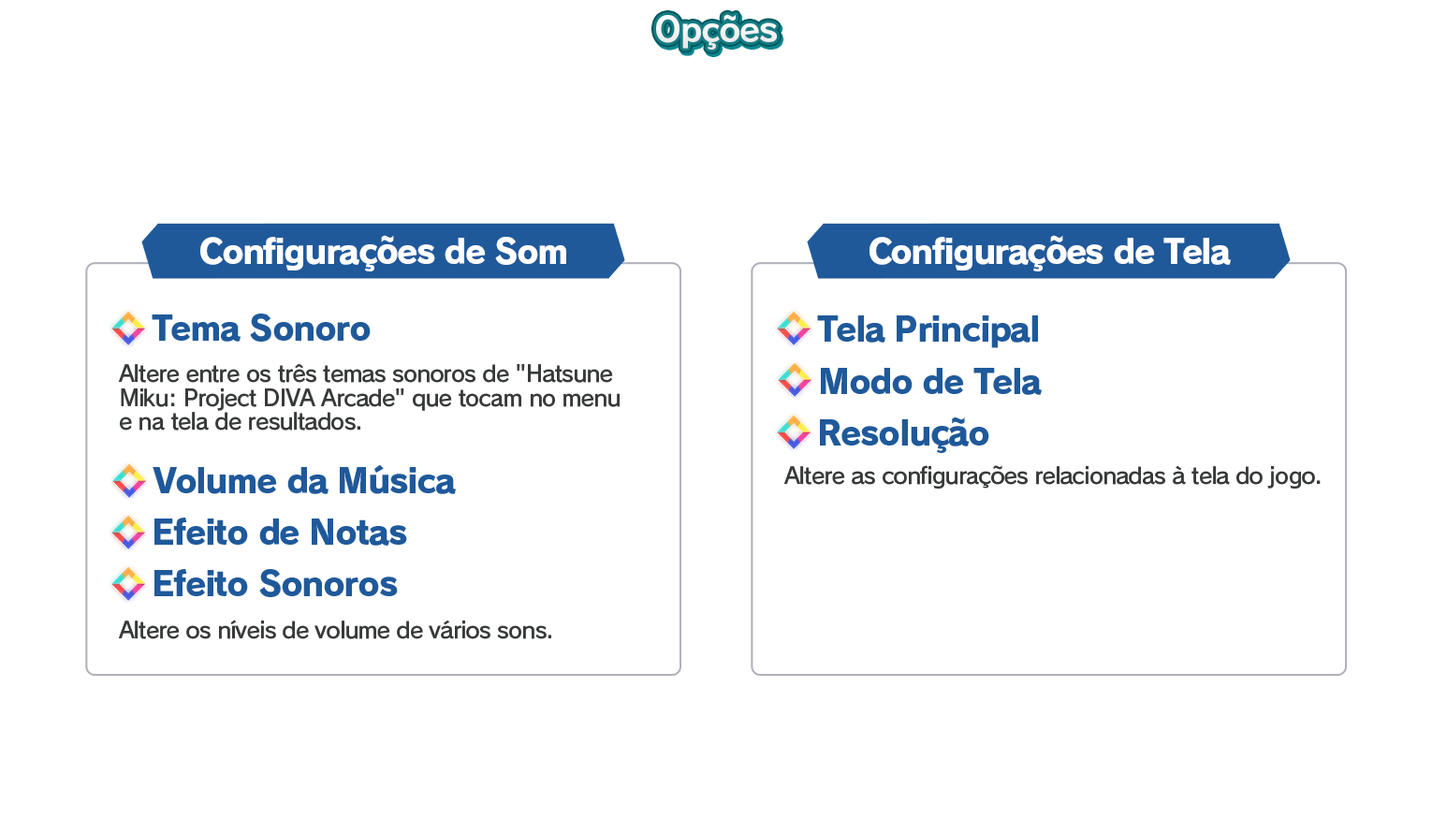
<style>
.page{position:relative;width:1432px;height:833px;background:#ffffff}
.page>*{position:absolute;margin:0}
.t1{font:33.7px "RodinPro-B";letter-spacing:-0.039em;color:#f2f3f3}
.t2{font:33.7px "RodinPro-EB";letter-spacing:-0.048em;color:#ffffff}
.t3{font:33.7px "RodinPro-EB";letter-spacing:-0.04em;color:#1f599a}
.t4{font:22.5px/23.7px "RodinPro-DB";letter-spacing:-0.04em;color:#383a3a}
.t5{font:22.5px "RodinPro-DB";letter-spacing:-0.04em;color:#383a3a}
</style>
<div class="page">
<p class="t1" style="left:656px;top:14px;width:121px;height:36px">Opções</p>
<p class="t2" style="left:200px;top:235px;width:366px;height:36px">Configurações de Som</p>
<p class="t2" style="left:869px;top:235px;width:362px;height:36px">Configurações de Tela</p>
<p class="t3" style="left:152px;top:313px;width:219px;height:29px">Tema Sonoro</p>
<p class="t3" style="left:817px;top:315px;width:221px;height:33px">Tela Principal</p>
<p class="t4" style="left:119px;top:364px;width:500px;height:66px">Altere entre os três temas sonoros de "Hatsune<br>Miku: Project DIVA Arcade" que tocam no menu<br>e na tela de resultados.</p>
<p class="t3" style="left:821px;top:368px;width:221px;height:27px">Modo de Tela</p>
<p class="t3" style="left:820px;top:417px;width:169px;height:36px">Resolução</p>
<p class="t3" style="left:153px;top:464px;width:303px;height:30px">Volume da Música</p>
<p class="t5" style="left:784px;top:465px;width:536px;height:23px">Altere as configurações relacionadas à tela do jogo.</p>
<p class="t3" style="left:154px;top:517px;width:253px;height:29px">Efeito de Notas</p>
<p class="t3" style="left:154px;top:569px;width:244px;height:28px">Efeito Sonoros</p>
<p class="t5" style="left:119px;top:619px;width:432px;height:20px">Altere os níveis de volume de vários sons.</p>
</div>
